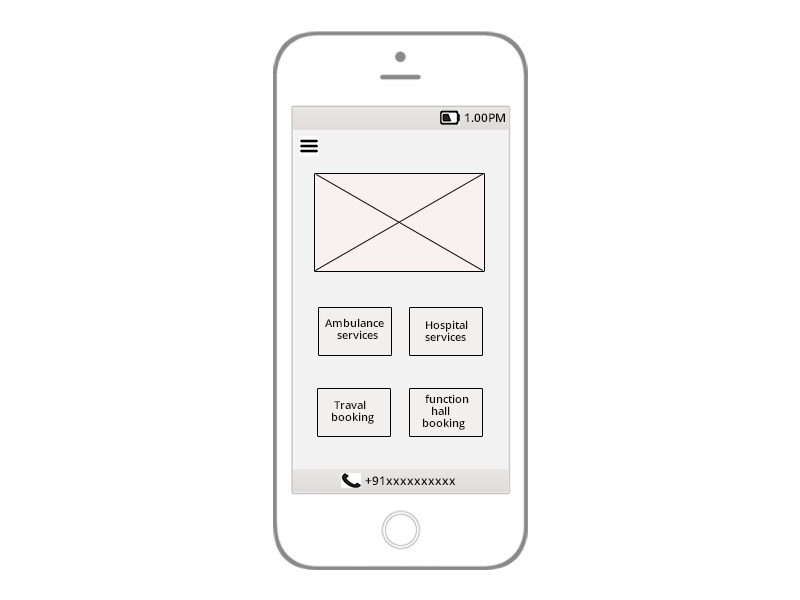
<style>
.page{position:relative;width:800px;height:600px;background:#ffffff}
.page>*{position:absolute;margin:0}
.t1{font:12px "OpenSans-Semibold";color:#090909}
.t2{font:11px/6px "OpenSans-Semibold";color:#090909}
</style>
<div class="page">
<p class="t1" style="left:465px;top:113px;width:40px;height:9px">1.00PM</p>
<p class="t2" style="left:325px;top:318px;width:59px;height:21px">Ambulance<br><br>      services</p>
<p class="t2" style="left:425px;top:320px;width:43px;height:21px">Hospital<br>  <br>    services</p>
<p class="t2" style="left:332px;top:400px;width:42px;height:24px">Traval <br><br>    booking</p>
<p class="t2" style="left:423px;top:394px;width:46px;height:36px">function <br>  <br>      hall <br> <br>   booking</p>
<p class="t1" style="left:365px;top:476px;width:91px;height:9px">+91xxxxxxxxxx</p>
</div>
